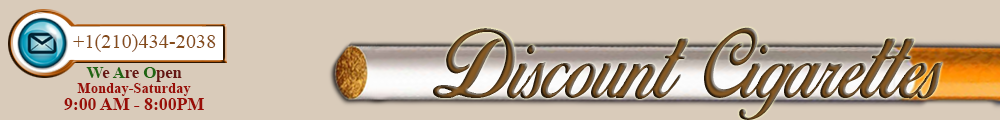
<style>
.page{position:relative;width:1000px;height:120px;background:#d9cbba}
.page>*{position:absolute;margin:0}
.t1{font:20.3px "TimesNewRomanPSMT";color:#864d1b}
.t2{font:16.5px "TimesNewRomanPS-BoldMT";color:#661612}
.t3{font:16.5px "TimesNewRomanPS-BoldMT";color:#206612}
.t4{font:14.5px "TimesNewRomanPS-BoldMT";color:#990e07}
.t5{font:17.7px "TimesNewRomanPS-BoldMT";color:#990e07}
</style>
<div class="page">
<p class="t1" style="left:73px;top:34px;width:143px;height:18px">+1(210)434-2038</p>
<p class="t2" style="left:86px;top:67px;width:96px;height:15px"><span class="t3">W</span>e <span class="t3">A</span>re <span class="t3">O</span>pen</p>
<p class="t4" style="left:77px;top:83px;width:114px;height:13px">Monday-Saturday</p>
<p class="t5" style="left:64px;top:98px;width:140px;height:12px">9:00 AM - 8:00PM</p>
</div>
